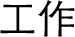
<style>
.page{position:relative;width:75px;height:37px;background:#ffffff}
.page>*{position:absolute;margin:0}
.t1{font:38.9px "STHeitiTC-Light";color:#000000}
</style>
<div class="page">
<p class="t1" style="left:0px;top:0px;width:75px;height:37px">工作</p>
</div>
